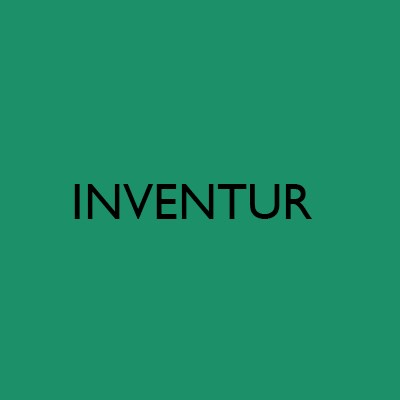
<style>
.page{position:relative;width:400px;height:400px;background:#1c9169}
.page>*{position:absolute;margin:0}
.t1{font:50px "GillSansMT";color:#000000}
</style>
<div class="page">
<p class="t1" style="left:74px;top:184px;width:239px;height:35px">INVENTUR</p>
</div>
